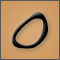
<style>
.page{position:relative;width:60px;height:60px}
.page>*{position:absolute;margin:0}
.t1{font:50px "Handwriting-Dakota";color:#000000}
</style>
<div class="page">
<p class="t1" style="left:12px;top:12px;width:36px;height:37px">O</p>
</div>
